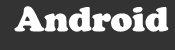
<style>
.page{position:relative;width:175px;height:50px;background:#333333}
.page>*{position:absolute;margin:0}
.t1{font:36px "CooperBlack";color:#fefefe}
</style>
<div class="page">
<p class="t1" style="left:14px;top:6px;width:155px;height:26px">Android</p>
</div>
